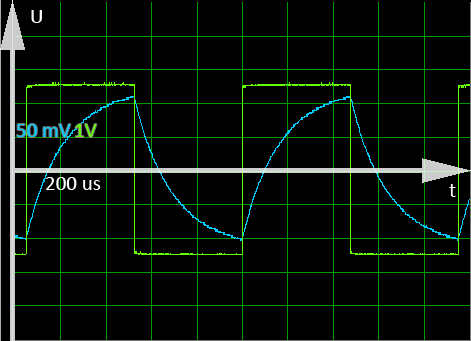
<style>
.page{position:relative;width:471px;height:341px;background:#000000}
.page>*{position:absolute;margin:0}
.t1{font:36px "Calibri";color:#ffffff}
.t2{font:36px "Calibri";color:#00ccff}
.t3{font:36px "Calibri";color:#66ff00}
</style>
<div class="page">
<p class="t1" style="left:31px;top:10px;width:11px;height:13px">U</p>
<p class="t2" style="left:17px;top:124px;width:54px;height:13px">50 mV</p>
<p class="t3" style="left:75px;top:124px;width:22px;height:13px">1V</p>
<p class="t1" style="left:46px;top:177px;width:55px;height:13px">200 us</p>
<p class="t1" style="left:449px;top:184px;width:7px;height:13px">t</p>
</div>
